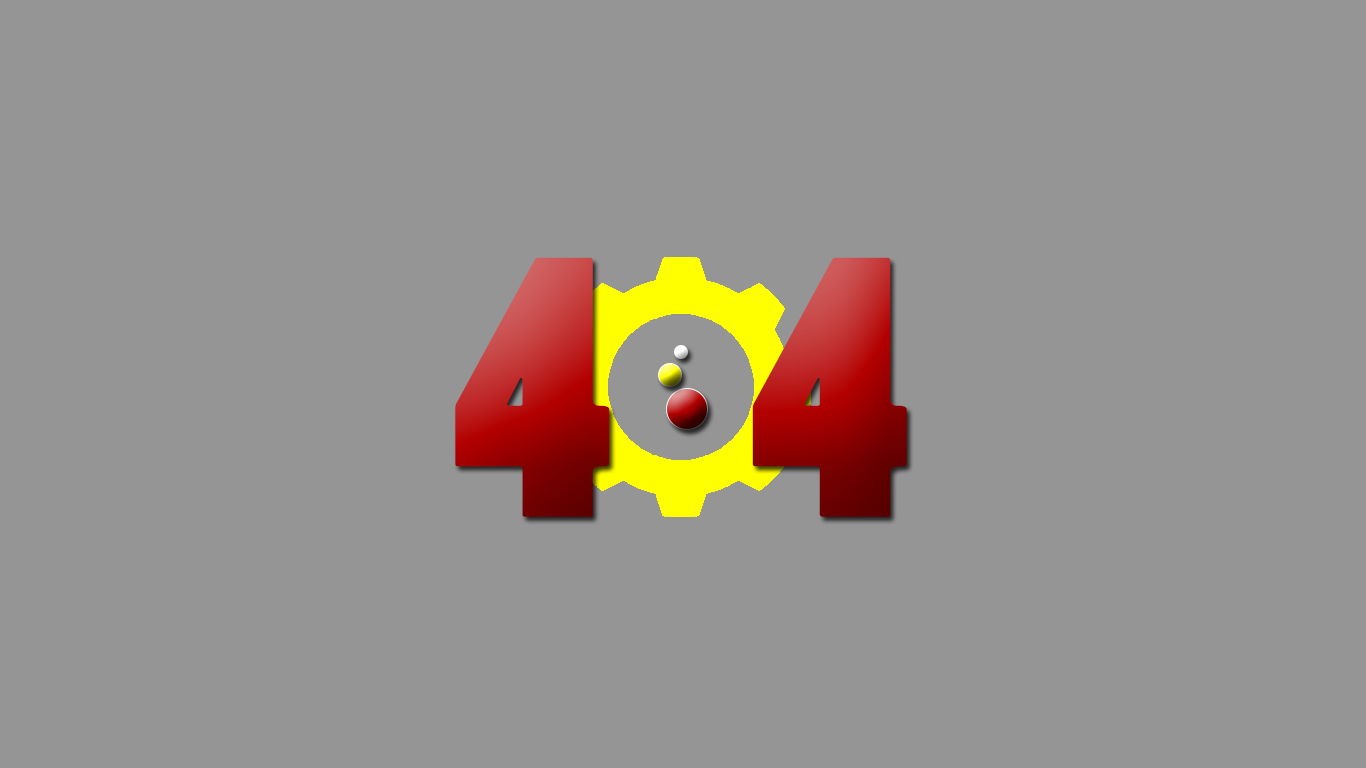
<style>
.page{position:relative;width:1366px;height:768px;background:#959595}
.page>*{position:absolute;margin:0}
.t1{font:350px "PoplarStd"}
</style>
<div class="page">
<p class="t1" style="left:455px;top:257px;width:452px;height:260px">4    4</p>
</div>
